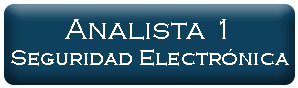
<style>
.page{position:relative;width:298px;height:88px;background:#0e415e}
.page>*{position:absolute;margin:0}
.t1{font:22px "CopperplateGothic-Light";color:#ffffff}
.t2{font:30px "CopperplateGothic-Light";color:#ffffff}
</style>
<div class="page">
<p class="t1" style="left:11px;top:19px;width:278px;height:47px;text-align:center"><span class="t2">Analista 1<br></span>Seguridad Electrónica</p>
</div>
